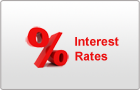
<style>
.page{position:relative;width:140px;height:90px}
.page>*{position:absolute;margin:0}
.t1{font:12.3px "Arial-BoldMT";color:#eb0f0f}
</style>
<div class="page">
<p class="t1" style="left:75px;top:37px;width:44px;height:24px">Interest <br>Rates</p>
</div>
